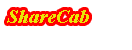
<style>
.page{position:relative;width:132px;height:50px;background:#ffffff}
.page>*{position:absolute;margin:0}
.t1{font:20px "TimesNewRomanPS-BoldItalicMT";color:#e9e606}
</style>
<div class="page">
<p class="t1" style="left:7px;top:10px;width:82px;height:13px">ShareCab</p>
</div>
